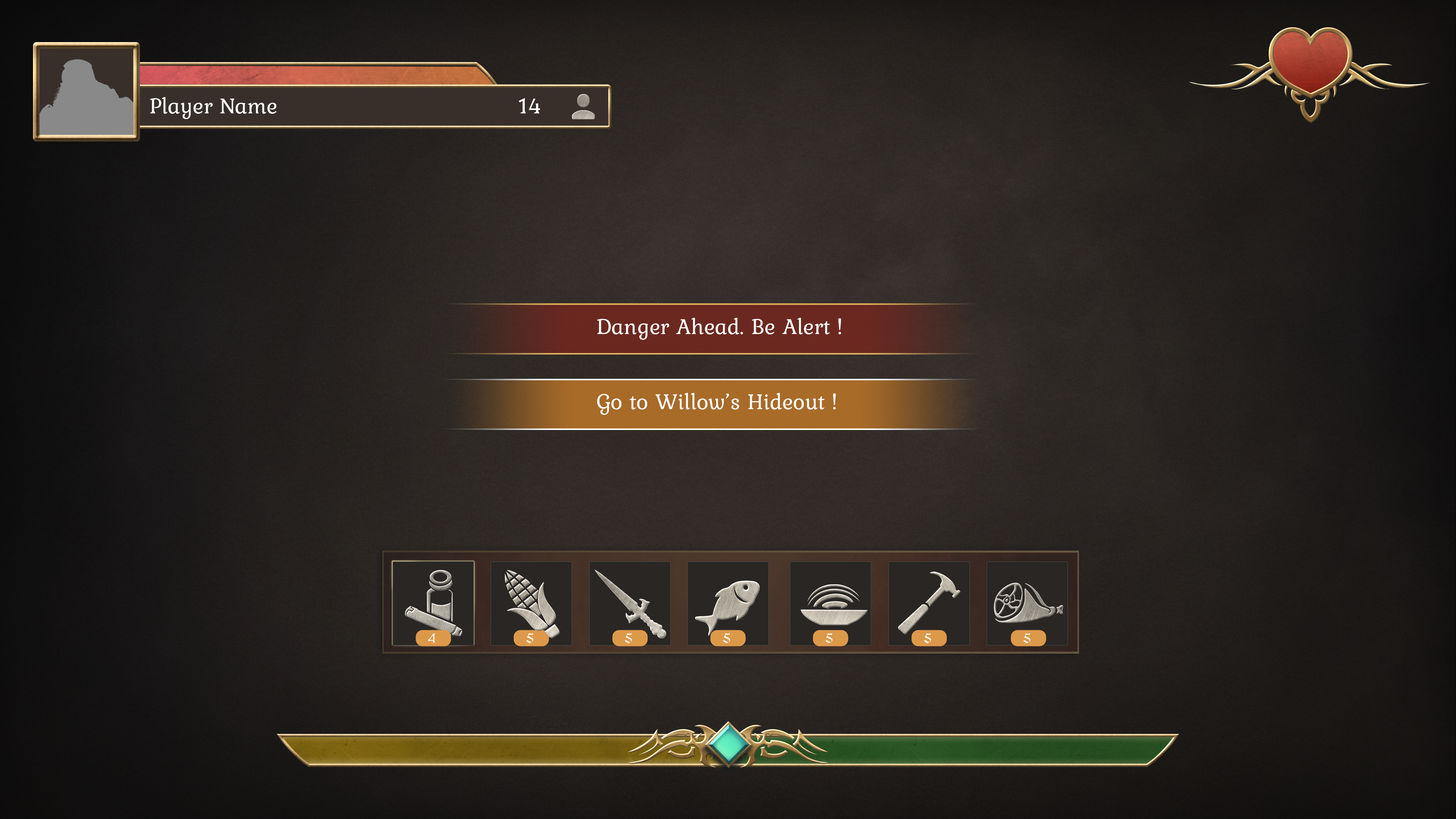
<style>
.page{position:relative;width:1456px;height:819px}
.page>*{position:absolute;margin:0}
.t1{font:22.7px "Kurale-Regular";color:#ffffff}
.t2{font:13.6px "MedievalSharp";color:#ffffff}
</style>
<div class="page">
<p class="t1" style="left:150px;top:97px;width:126px;height:22px">Player Name</p>
<p class="t1" style="left:519px;top:98px;width:21px;height:15px">14</p>
<p class="t1" style="left:597px;top:318px;width:244px;height:22px">Danger Ahead. Be Alert !</p>
<p class="t1" style="left:597px;top:393px;width:239px;height:22px">Go to Willow’s Hideout !</p>
<p class="t2" style="left:428px;top:633px;width:7px;height:10px">4</p>
<p class="t2" style="left:526px;top:633px;width:7px;height:10px">5</p>
<p class="t2" style="left:624px;top:633px;width:8px;height:10px">5</p>
<p class="t2" style="left:723px;top:633px;width:7px;height:10px">5</p>
<p class="t2" style="left:825px;top:633px;width:8px;height:10px">5</p>
<p class="t2" style="left:924px;top:633px;width:7px;height:10px">5</p>
<p class="t2" style="left:1023px;top:633px;width:8px;height:10px">5</p>
</div>
